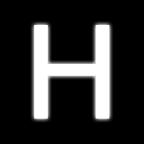
<style>
.page{position:relative;width:144px;height:144px;background:#000000}
.page>*{position:absolute;margin:0}
.t1{font:131px "Oslo-Bold";letter-spacing:0.01em;color:#ffffff;scale:1.06 1}
</style>
<div class="page">
<p class="t1" style="left:34px;top:25px;width:76px;height:94px">H</p>
</div>
